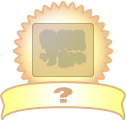
<style>
.page{position:relative;width:126px;height:120px;background:#ffffff}
.page>*{position:absolute;margin:0}
.t1{font:19.5px "Arial-Black";letter-spacing:0.045em;color:#d9ab7c;text-transform:uppercase}
</style>
<div class="page">
<p class="t1" style="left:54px;top:87px;width:19px;height:16px">?</p>
</div>
